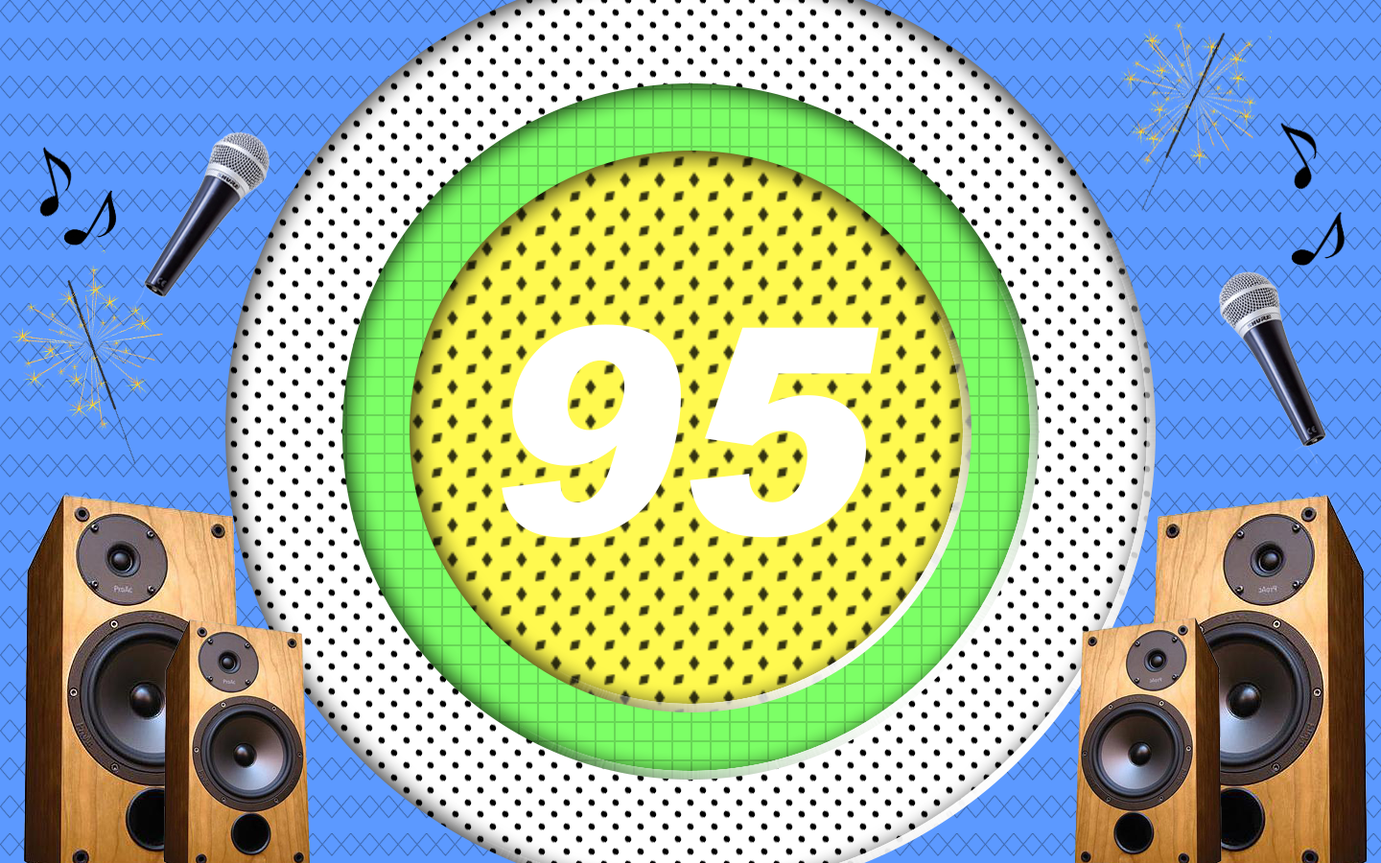
<style>
.page{position:relative;width:1381px;height:863px}
.page>*{position:absolute;margin:0}
.t1{font:287.8px "Arial-Black";color:#ffffff;font-style:italic}
</style>
<div class="page">
<p class="t1" style="left:502px;top:324px;width:377px;height:214px">95</p>
</div>
